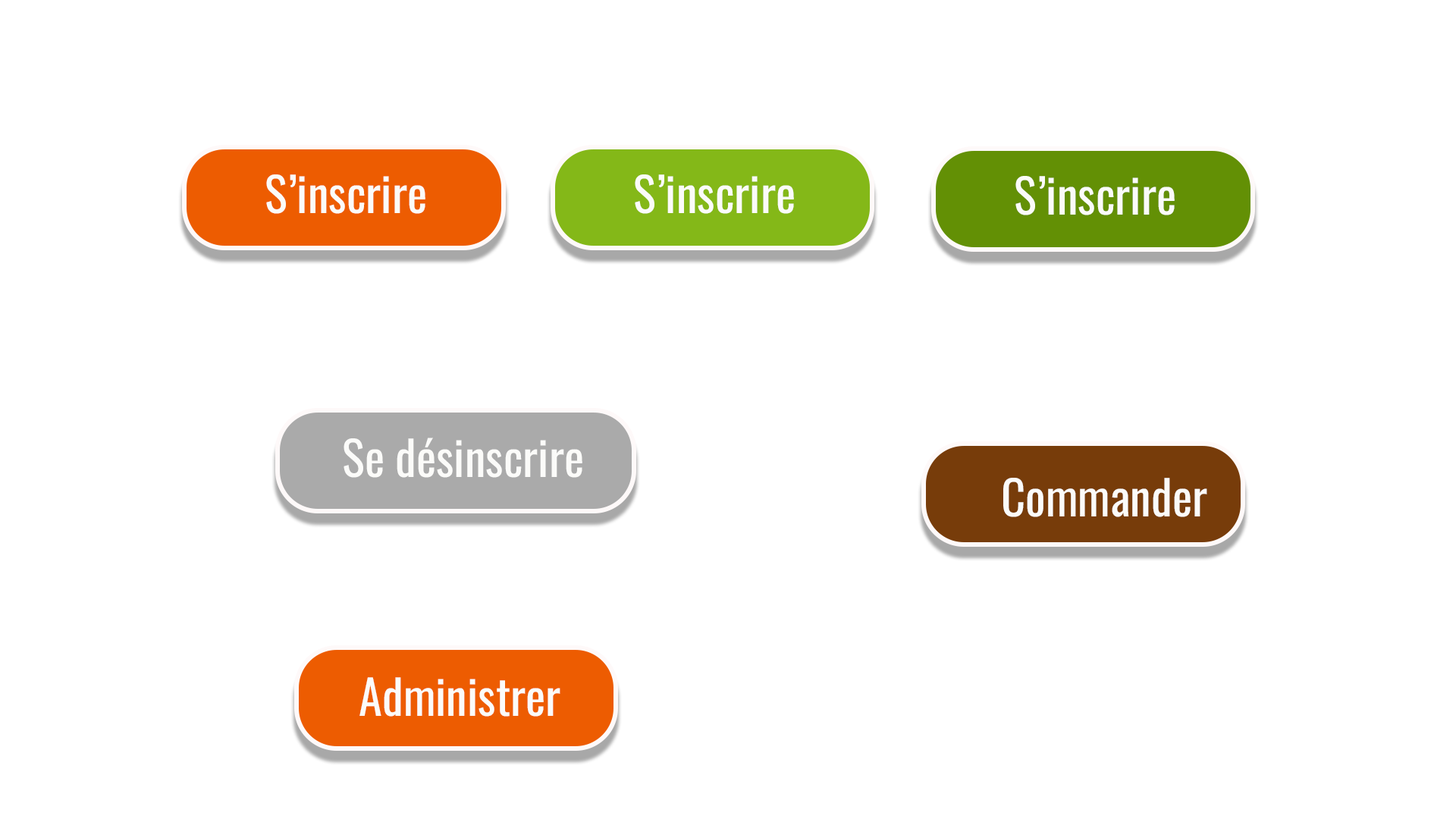
<style>
.page{position:relative;width:1456px;height:819px;background:#ffffff}
.page>*{position:absolute;margin:0}
.t1{font:47.4px "Oswald-Regular";color:#fbfbf9}
</style>
<div class="page">
<p class="t1" style="left:266px;top:174px;width:159px;height:40px">S’inscrire</p>
<p class="t1" style="left:635px;top:174px;width:159px;height:40px">S’inscrire</p>
<p class="t1" style="left:1015px;top:176px;width:160px;height:39px">S’inscrire</p>
<p class="t1" style="left:344px;top:438px;width:238px;height:40px">Se désinscrire</p>
<p class="t1" style="left:1003px;top:478px;width:204px;height:39px">Commander</p>
<p class="t1" style="left:359px;top:677px;width:201px;height:40px">Administrer</p>
</div>
